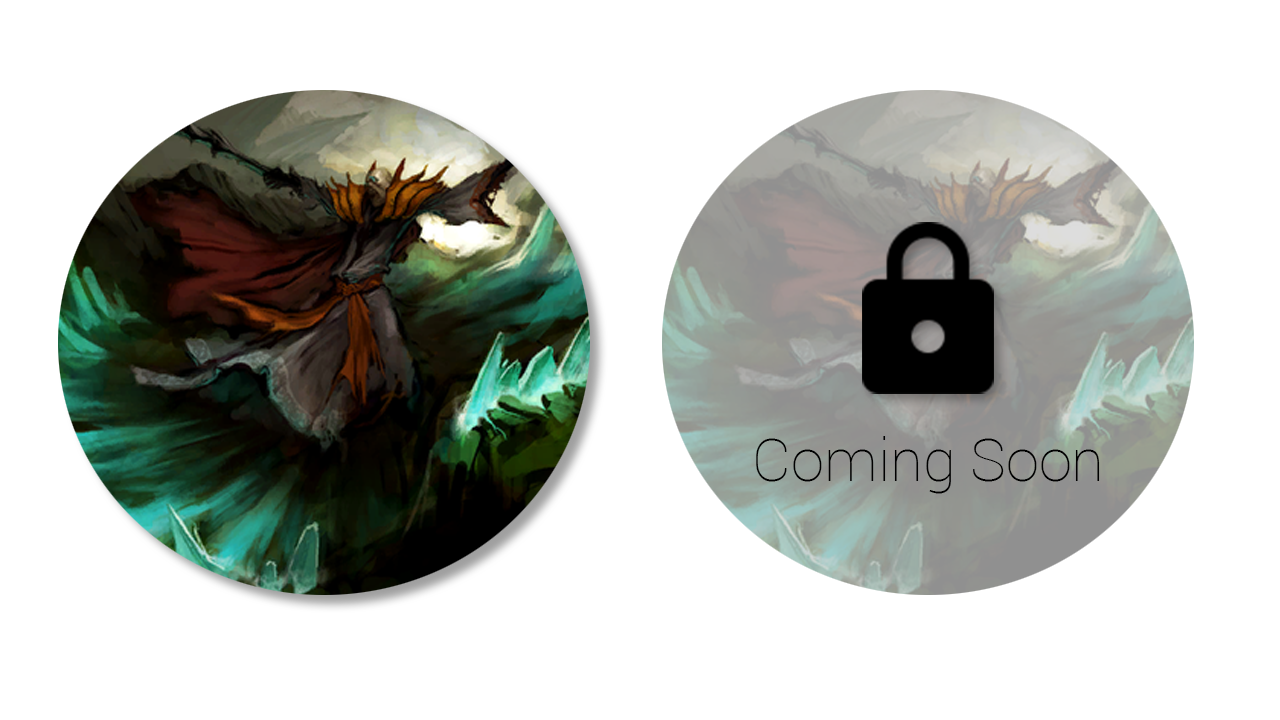
<style>
.page{position:relative;width:1280px;height:720px;background:#ffffff}
.page>*{position:absolute;margin:0}
.t1{font:60px "Roboto-Thin";color:#000000}
</style>
<div class="page">
<p class="t1" style="left:756px;top:436px;width:344px;height:58px">Coming Soon</p>
</div>
